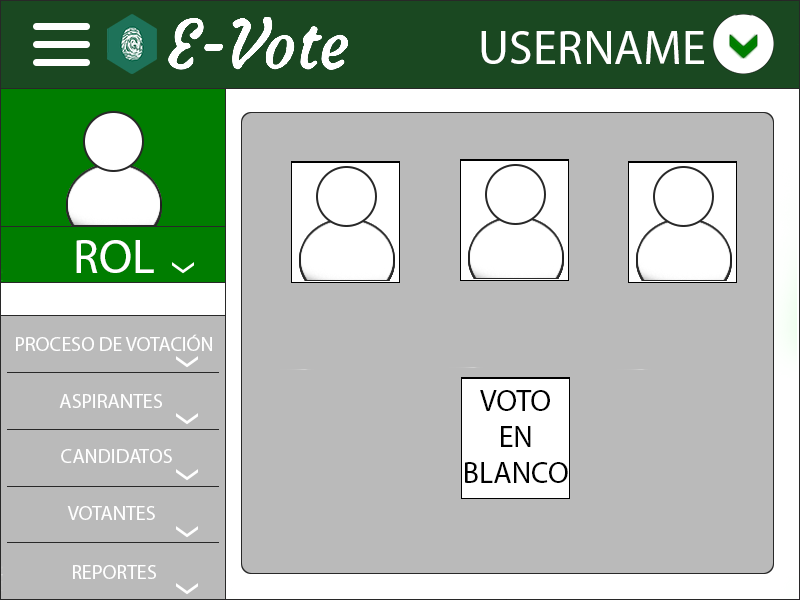
<style>
.page{position:relative;width:800px;height:600px;background:#bababa}
.page>*{position:absolute;margin:0}
.t1{font:48px "MyriadPro-Regular";color:#ffffff}
.t2{font:20px "MyriadPro-Regular";color:#ffffff}
.t3{font:30px "MyriadPro-Regular";color:#000000}
</style>
<div class="page">
<p class="t1" style="left:481px;top:31px;width:223px;height:33px">USERNAME</p>
<p class="t1" style="left:76px;top:240px;width:78px;height:33px">ROL</p>
<p class="t2" style="left:16px;top:334px;width:196px;height:17px">PROCESO DE VOTACIÓN</p>
<p class="t3" style="left:465px;top:390px;width:103px;height:93px;text-align:center">VOTO<br>EN<br>BLANCO</p>
<p class="t2" style="left:59px;top:394px;width:103px;height:14px">ASPIRANTES</p>
<p class="t2" style="left:61px;top:449px;width:111px;height:14px">CANDIDATOS</p>
<p class="t2" style="left:67px;top:506px;width:88px;height:14px">VOTANTES</p>
<p class="t2" style="left:73px;top:565px;width:83px;height:14px">REPORTES</p>
</div>
